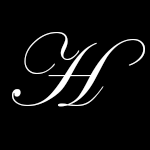
<style>
.page{position:relative;width:150px;height:150px;background:#000000}
.page>*{position:absolute;margin:0}
.t1{font:104.2px "EdwardianScriptITC";color:#ffffff}
</style>
<div class="page">
<p class="t1" style="left:12px;top:32px;width:133px;height:75px">H</p>
</div>
